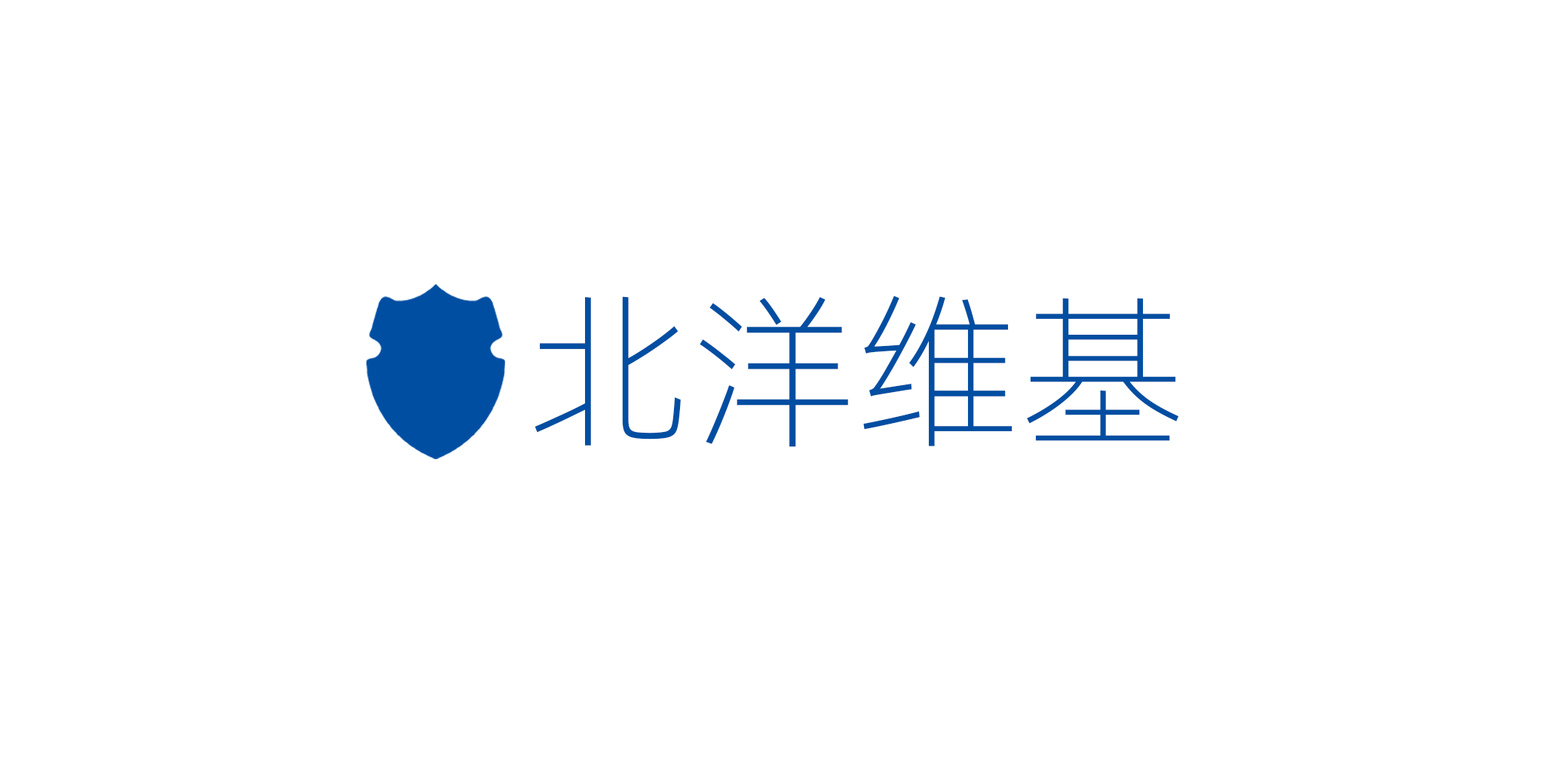
<style>
.page{position:relative;width:1544px;height:772px;background:#ffffff}
.page>*{position:absolute;margin:0}
.t1{font:167.3px "Alibaba-PuHuiTi-L";color:#004ea2}
</style>
<div class="page">
<p class="t1" style="left:535px;top:296px;width:644px;height:151px">北洋维基</p>
</div>
